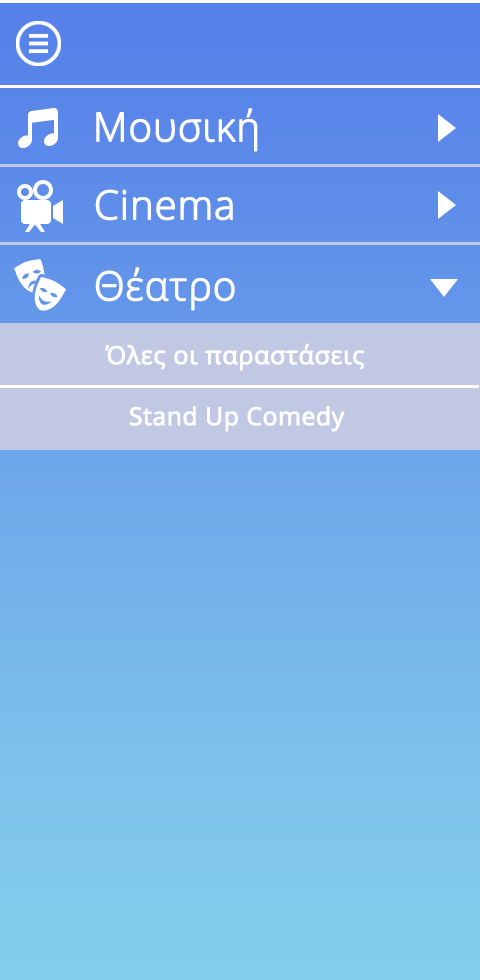
<style>
.page{position:relative;width:480px;height:980px}
.page>*{position:absolute;margin:0}
.t1{font:40px "OpenSans-Light";color:#ffffff;font-weight:bold}
.t2{font:24.6px "OpenSans-Regular";color:#ffffff;font-weight:bold}
</style>
<div class="page">
<p class="t1" style="left:96px;top:108px;width:162px;height:44px">Μουσική</p>
<p class="t1" style="left:95px;top:189px;width:138px;height:32px">Cinema</p>
<p class="t1" style="left:95px;top:267px;width:140px;height:44px">Θέατρο</p>
<p class="t2" style="left:105px;top:343px;width:260px;height:28px">Όλες οι παραστάσεις</p>
<p class="t2" style="left:129px;top:406px;width:216px;height:26px">Stand Up Comedy</p>
</div>
